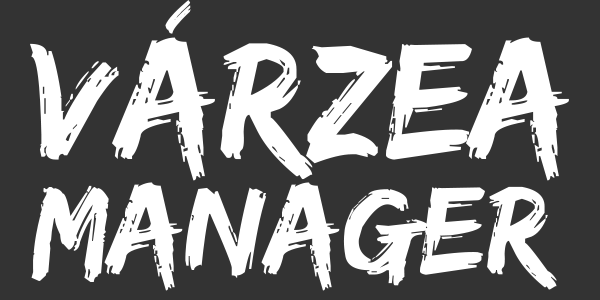
<style>
.page{position:relative;width:600px;height:300px;background:#333333}
.page>*{position:absolute;margin:0}
.t1{font:172px "EdoSZ";color:#ffffff}
.t2{font:130px "EdoSZ";color:#ffffff}
</style>
<div class="page">
<p class="t1" style="left:30px;top:0px;width:539px;height:181px">várzea</p>
<p class="t2" style="left:31px;top:182px;width:526px;height:109px">manager</p>
</div>
